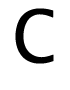
<style>
.page{position:relative;width:70px;height:90px;background:#ffffff}
.page>*{position:absolute;margin:0}
.t1{font:72px "LucidaSans-Typewriter";color:#000000;font-weight:bold}
</style>
<div class="page">
<p class="t1" style="left:15px;top:8px;width:39px;height:56px">C</p>
</div>
